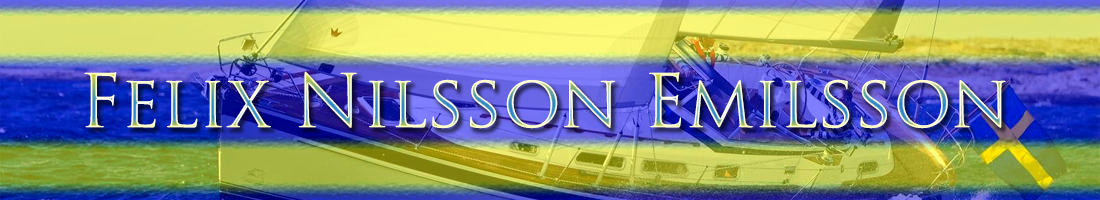
<style>
.page{position:relative;width:1100px;height:200px}
.page>*{position:absolute;margin:0}
.t1{font:72px "TrajanPro-Regular"}
</style>
<div class="page">
<p class="t1" style="left:84px;top:71px;width:922px;height:58px">Felix Nilsson Emilsson</p>
</div>
